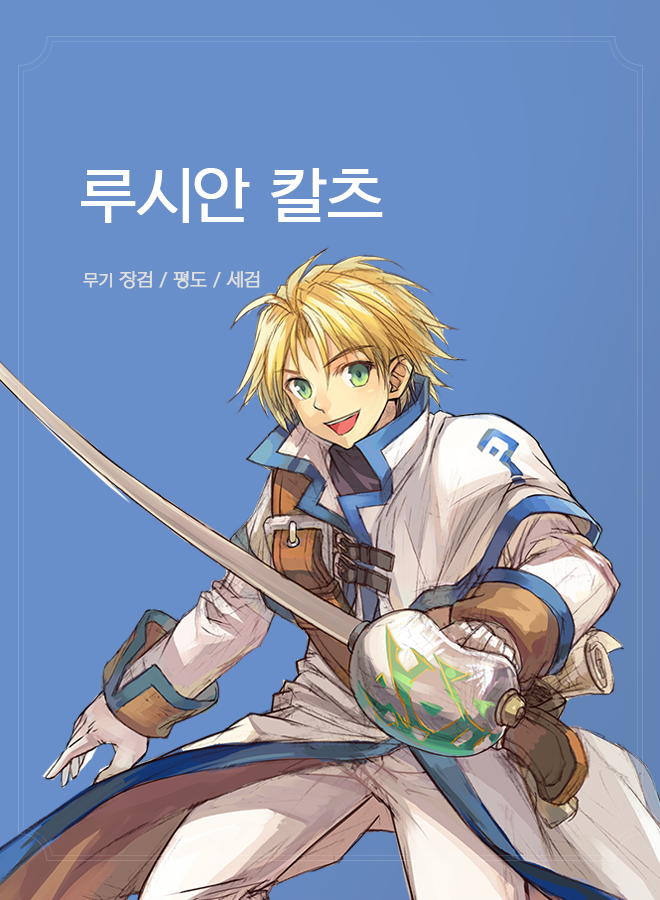
<style>
.page{position:relative;width:660px;height:900px;background:#688fca}
.page>*{position:absolute;margin:0}
.t1{font:60px "NEXONLv1GothicRegular";letter-spacing:-0.025em;color:#ffffff;font-weight:bold}
.t2{font:18px "NEXONLv1GothicRegular";letter-spacing:-0.025em;color:#dfdfdf;font-weight:bold}
.t3{font:16px "NEXONLv1GothicRegular";letter-spacing:-0.025em;color:#dfdfdf;font-weight:bold}
</style>
<div class="page">
<p class="t1" style="left:81px;top:168px;width:302px;height:55px">루시안 칼츠</p>
<p class="t2" style="left:83px;top:271px;width:177px;height:18px"><span class="t3">무기</span> 장검 / 평도 / 세검</p>
</div>
